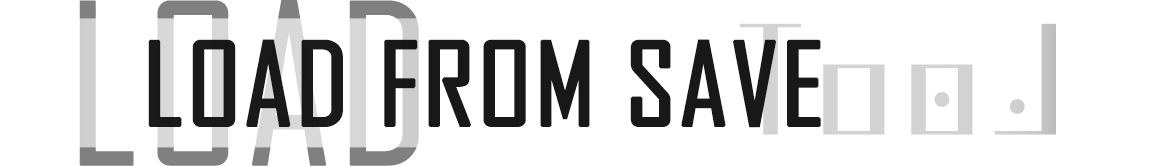
<style>
.page{position:relative;width:1156px;height:166px;background:#ffffff}
.page>*{position:absolute;margin:0}
.t1{font:110px "AgencyFB-Reg";color:#000000;text-transform:uppercase;font-weight:bold;scale:1.1 1}
</style>
<div class="page">
<p class="t1" style="left:148px;top:39px;width:673px;height:89px;opacity:0.95">LOAD from save</p>
</div>
